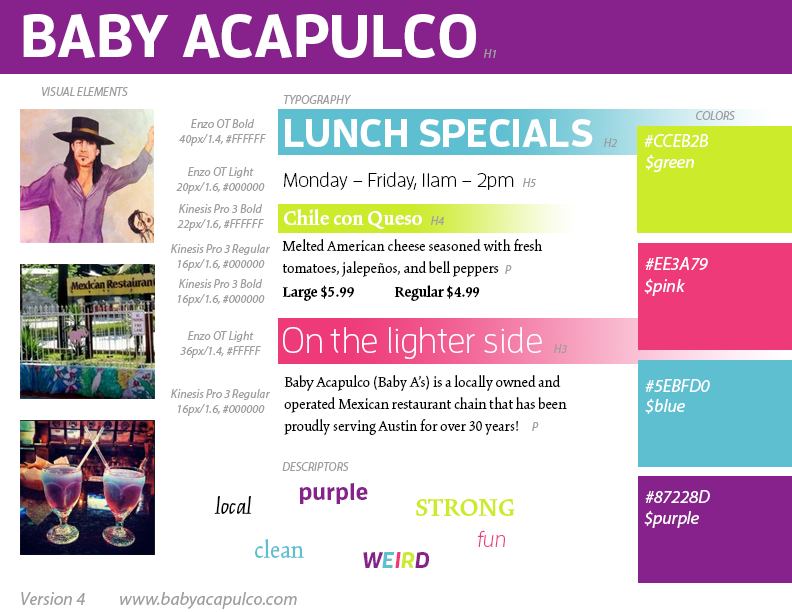
<style>
.page{position:relative;width:792px;height:612px;background:#fefffe}
.page>*{position:absolute;margin:0}
.t1{font:60px "EnzoOT-Bold";color:#ffffff}
.t2{font:12px "MyriadPro-It";color:#9e9e9e}
.t3{font:40px "EnzoOT-Bold";color:#ffffff}
.t4{font:18px "MyriadPro-It";color:#ffffff}
.t5{font:20px "EnzoOT-Light";color:#000000}
.t6{font:22px "KinesisPro3-Bold";color:#ffffff}
.t7{font:16px/22px "KinesisPro3-Regular";color:#000000}
.t8{font:16px "KinesisPro3-Bold";color:#000000}
.t9{font:36px "EnzoOT-Light";color:#ffffff}
.t10{font:24px "EnzoOT-Bold";color:#87228d}
.t11{font:24px "KinesisPro3-Italic";color:#000000}
.t12{font:27px "KinesisPro3-Bold";color:#cceb2b}
.t13{font:22px "EnzoOT-LightIta";color:#ee3a79}
.t14{font:26px "KinesisPro3-Regular";color:#5ebfd0}
.t15{font:22px "EnzoOT-BoldIta";color:#87228d}
.t16{font:22px "EnzoOT-BoldIta";color:#5ebfd0}
.t17{font:22px "EnzoOT-BoldIta";color:#ee3a79}
.t18{font:22px "EnzoOT-BoldIta";color:#cceb2b}
.t19{font:18px "MyriadPro-It";color:#9e9e9e}
</style>
<div class="page">
<p class="t1" style="left:23px;top:14px;width:453px;height:44px">BABY ACAPULCO</p>
<p class="t2" style="left:484px;top:49px;width:12px;height:9px">H1</p>
<p class="t2" style="left:42px;top:87px;width:86px;height:9px">VISUAL ELEMENTS</p>
<p class="t2" style="left:283px;top:95px;width:68px;height:9px">TYPOGRAPHY</p>
<p class="t2" style="left:696px;top:111px;width:39px;height:9px">COLORS</p>
<p class="t2" style="left:179px;top:119px;width:87px;height:27px;text-align:center">Enzo OT Bold<br>40px/1.4, #FFFFFF</p>
<p class="t3" style="left:285px;top:119px;width:308px;height:28px">LUNCH SPECIALS</p>
<p class="t4" style="left:644px;top:134px;width:64px;height:13px">#CCEB2B</p>
<p class="t2" style="left:604px;top:138px;width:13px;height:9px">H2</p>
<p class="t4" style="left:645px;top:154px;width:49px;height:18px">$green</p>
<p class="t2" style="left:176px;top:167px;width:89px;height:27px;text-align:center">Enzo OT Light<br>20px/1.6, #000000</p>
<p class="t5" style="left:284px;top:172px;width:230px;height:18px">Monday – Friday, 11am – 2pm</p>
<p class="t2" style="left:523px;top:178px;width:13px;height:9px">H5</p>
<p class="t2" style="left:177px;top:204px;width:87px;height:27px;text-align:center">Kinesis Pro 3 Bold<br>22px/1.6, #FFFFFF</p>
<p class="t6" style="left:284px;top:209px;width:138px;height:20px">Chile con Queso</p>
<p class="t2" style="left:431px;top:216px;width:13px;height:9px">H4</p>
<p class="t2" style="left:171px;top:244px;width:99px;height:27px;text-align:center">Kinesis Pro 3 Regular<br>16px/1.6, #000000</p>
<p class="t7" style="left:282px;top:239px;width:261px;height:38px">Melted American cheese seasoned with fresh <br>tomatoes, jalepeños, and bell peppers</p>
<p class="t4" style="left:645px;top:257px;width:63px;height:13px">#EE3A79</p>
<p class="t2" style="left:505px;top:265px;width:7px;height:9px">P</p>
<p class="t2" style="left:178px;top:279px;width:87px;height:27px;text-align:center">Kinesis Pro 3 Bold<br>16px/1.6, #000000</p>
<p class="t4" style="left:644px;top:278px;width:41px;height:18px">$pink</p>
<p class="t8" style="left:282px;top:285px;width:72px;height:16px">Large $5.99</p>
<p class="t8" style="left:394px;top:285px;width:86px;height:16px">Regular $4.99</p>
<p class="t9" style="left:283px;top:327px;width:259px;height:32px">On the lighter side</p>
<p class="t2" style="left:180px;top:331px;width:81px;height:27px;text-align:center">Enzo OT Light<br>36px/1.4, #FFFFF</p>
<p class="t2" style="left:554px;top:344px;width:13px;height:9px">H3</p>
<p class="t7" style="left:284px;top:375px;width:283px;height:60px">Baby Acapulco (Baby A’s) is a locally owned and operated Mexican restaurant chain that has been proudly serving Austin for over 30 years!</p>
<p class="t2" style="left:171px;top:389px;width:99px;height:27px;text-align:center">Kinesis Pro 3 Regular<br>16px/1.6, #000000</p>
<p class="t4" style="left:645px;top:379px;width:65px;height:13px">#5EBFD0</p>
<p class="t4" style="left:645px;top:398px;width:40px;height:16px">$blue</p>
<p class="t2" style="left:532px;top:422px;width:7px;height:9px">P</p>
<p class="t2" style="left:282px;top:462px;width:67px;height:9px">DESCRIPTORS</p>
<p class="t10" style="left:299px;top:483px;width:69px;height:21px">purple</p>
<p class="t11" style="left:214px;top:495px;width:37px;height:19px">local</p>
<p class="t4" style="left:645px;top:490px;width:65px;height:13px">#87228D</p>
<p class="t12" style="left:416px;top:499px;width:99px;height:17px">STRONG</p>
<p class="t4" style="left:644px;top:510px;width:55px;height:18px">$purple</p>
<p class="t13" style="left:477px;top:530px;width:28px;height:17px">fun</p>
<p class="t14" style="left:255px;top:539px;width:49px;height:19px">clean</p>
<p class="t15" style="left:363px;top:552px;width:66px;height:16px">W<span class="t16">E</span><span class="t17">I</span><span class="t18">R</span>D</p>
<p class="t19" style="left:21px;top:592px;width:64px;height:13px">Version 4</p>
<p class="t19" style="left:120px;top:592px;width:177px;height:17px">www.babyacapulco.com</p>
</div>
